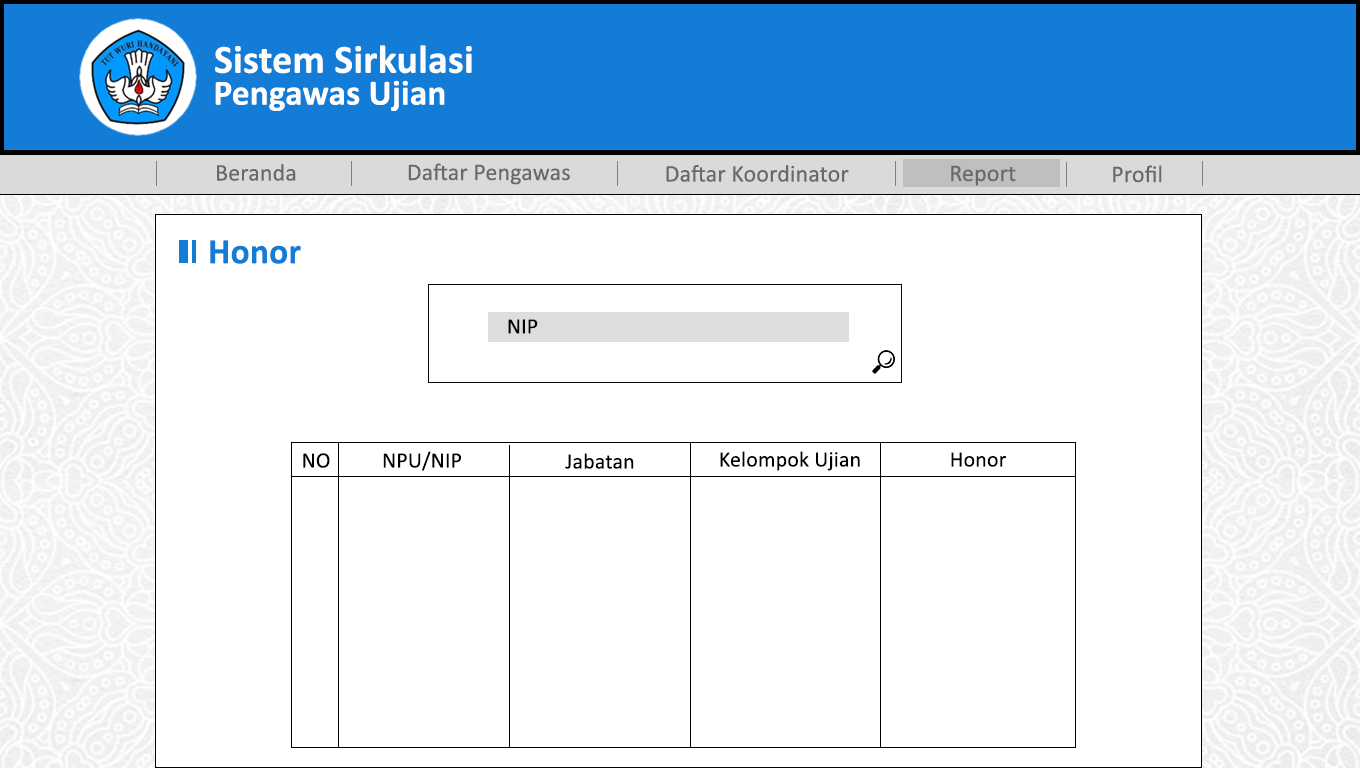
<style>
.page{position:relative;width:1360px;height:768px;background:#ffffff}
.page>*{position:absolute;margin:0}
.t1{font:40.1px "Calibri-Bold";letter-spacing:0.005em;color:#fdfdfd}
.t2{font:35.6px "Calibri-Bold";letter-spacing:0.005em;color:#fffefe}
.t3{font:24px "Calibri";letter-spacing:0.005em;color:#6a6969}
.t4{font:36px "Calibri-Bold";letter-spacing:0.005em;color:#127cd7}
.t5{font:22px "Calibri";letter-spacing:0.005em;color:#000000}
</style>
<div class="page">
<p class="t1" style="left:215px;top:45px;width:257px;height:29px">Sistem Sirkulasi</p>
<p class="t2" style="left:215px;top:80px;width:230px;height:31px">Pengawas Ujian</p>
<p class="t3" style="left:217px;top:164px;width:79px;height:17px">Beranda</p>
<p class="t3" style="left:408px;top:163px;width:162px;height:22px">Daftar Pengawas</p>
<p class="t3" style="left:666px;top:165px;width:183px;height:17px">Daftar Koordinator</p>
<p class="t3" style="left:951px;top:165px;width:65px;height:21px">Report</p>
<p class="t3" style="left:1113px;top:165px;width:49px;height:18px">Profil</p>
<p class="t4" style="left:210px;top:240px;width:91px;height:24px">Honor</p>
<p class="t5" style="left:508px;top:319px;width:30px;height:15px">NIP</p>
<p class="t5" style="left:303px;top:453px;width:27px;height:15px">NO</p>
<p class="t5" style="left:383px;top:451px;width:78px;height:20px">NPU/NIP</p>
<p class="t5" style="left:565px;top:453px;width:69px;height:16px">Jabatan</p>
<p class="t5" style="left:720px;top:451px;width:140px;height:20px">Kelompok Ujian</p>
<p class="t5" style="left:951px;top:452px;width:55px;height:15px">Honor</p>
</div>
